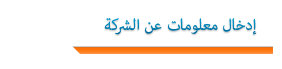
<style>
.page{position:relative;width:282px;height:69px;background:#ffffff}
.page>*{position:absolute;margin:0}
.t1{font:22px "AdobeArabic-Regular";color:#0080b2}
</style>
<div class="page">
<p class="t1" style="left:104px;top:18px;width:153px;height:17px">إدخال معلومات عن الشركة</p>
</div>
